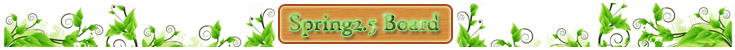
<style>
.page{position:relative;width:735px;height:50px;background:#ffffff}
.page>*{position:absolute;margin:0}
.t1{font:24px "HighTowerText-Reg";letter-spacing:-0.02em}
</style>
<div class="page">
<p class="t1" style="left:289px;top:13px;width:150px;height:24px">Spring2.5 Board</p>
</div>
